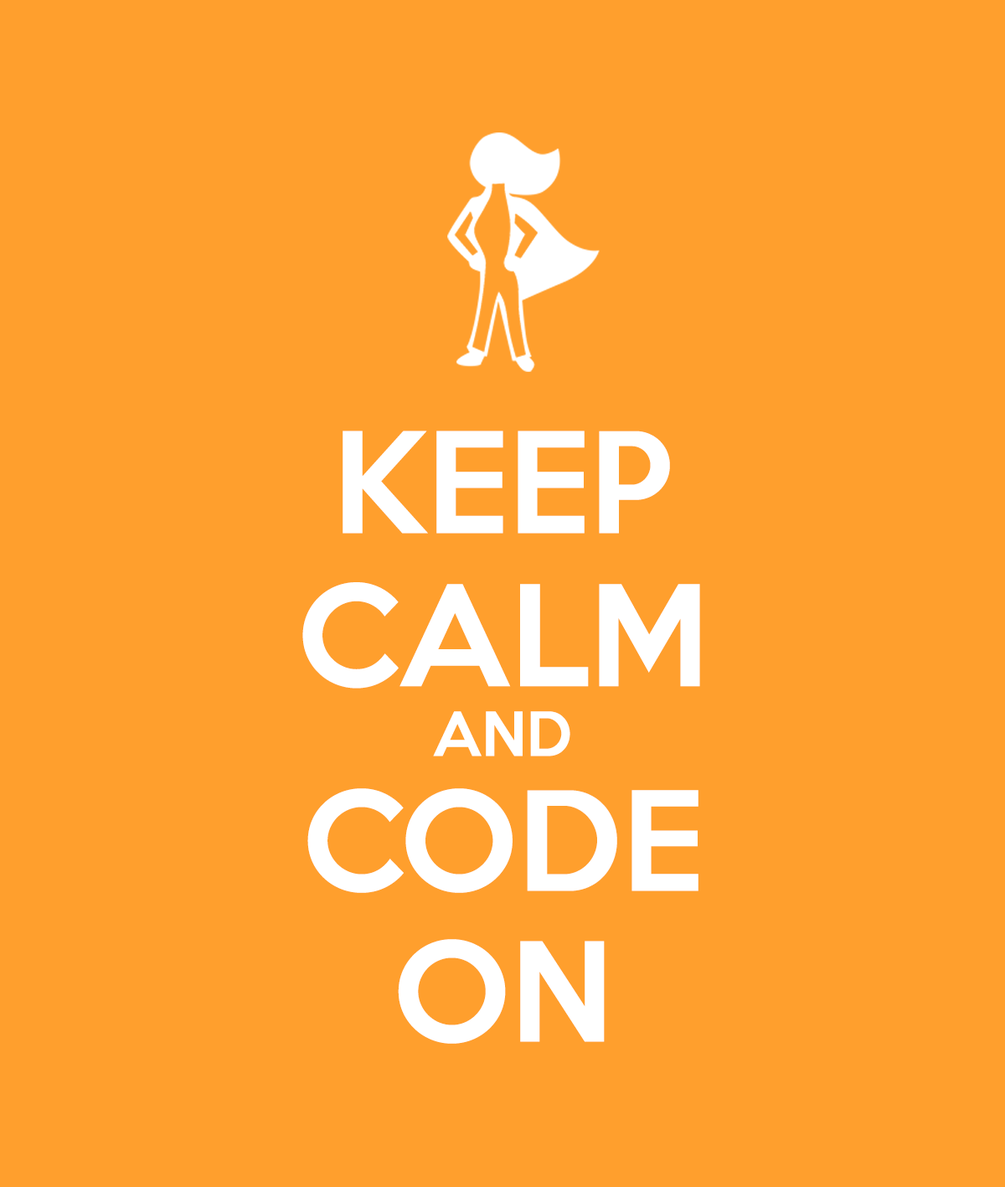
<style>
.page{position:relative;width:1005px;height:1187px;background:#ff9f2d}
.page>*{position:absolute;margin:0}
.t1{font:127.5px "KeepCalm-Medium";color:#ffffff}
.t2{font:55.8px/69.8px "KeepCalm-Medium";color:#ffffff}
.t3{font:125.6px "KeepCalm-Medium";color:#ffffff}
</style>
<div class="page">
<p class="t1" style="left:302px;top:430px;width:398px;height:326px;text-align:center">KEEP <br>CALM<br><span class="t2">AND</span></p>
<p class="t3" style="left:307px;top:788px;width:391px;height:255px;text-align:center">CODE <br>ON</p>
</div>
